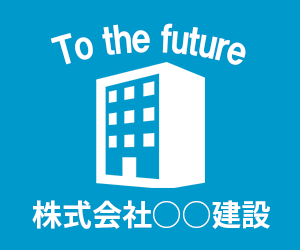
<style>
.page{position:relative;width:300px;height:250px;background:#0099cc}
.page>*{position:absolute;margin:0}
.t1{font:36px "HGPSoeiKakugothicUB";letter-spacing:-0.05em;color:#ffffff}
.t2{font:30px "NotoSansCJKjp-Bold";letter-spacing:-0.005em;color:#ffffff}
</style>
<div class="page">
<p class="t1" style="left:50px;top:23px;width:196px;height:42px">To the future</p>
<p class="t2" style="left:32px;top:200px;width:238px;height:29px">株式会社○○建設</p>
</div>
